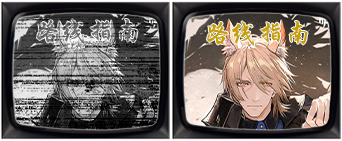
<style>
.page{position:relative;width:342px;height:141px}
.page>*{position:absolute;margin:0}
.t1{font:27.1px "STXingkai";color:#c5a006}
</style>
<div class="page">
<p class="t1" style="left:207px;top:21px;width:101px;height:25px">路线指南</p>
</div>
